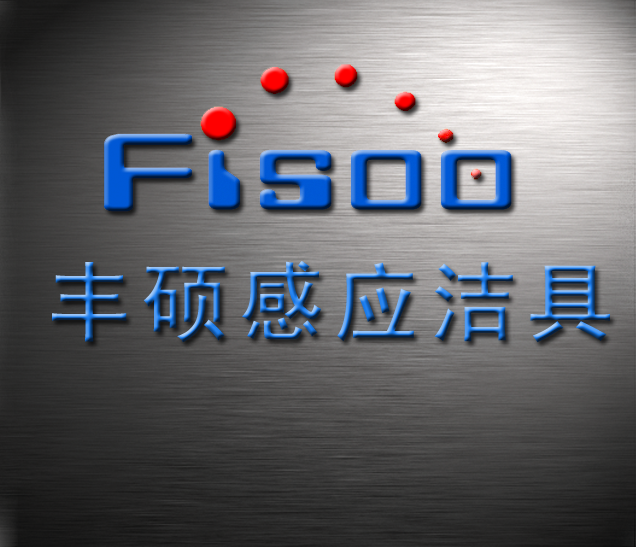
<style>
.page{position:relative;width:637px;height:547px}
.page>*{position:absolute;margin:0}
.t1{font:87.5px "SimHei";letter-spacing:0.1em}
</style>
<div class="page">
<p class="t1" style="left:52px;top:261px;width:558px;height:82px">丰硕感应洁具</p>
</div>
